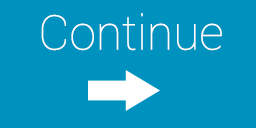
<style>
.page{position:relative;width:256px;height:128px;background:#0092bf}
.page>*{position:absolute;margin:0}
.t1{font:48px "Roboto-Thin";color:#ffffff}
</style>
<div class="page">
<p class="t1" style="left:41px;top:13px;width:181px;height:38px">Continue</p>
</div>
